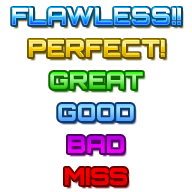
<style>
.page{position:relative;width:192px;height:192px;background:#ffffff}
.page>*{position:absolute;margin:0}
.t1{font:24px "Orbitron-Black"}
.t2{font:24px "Orbitron-Black";letter-spacing:0.01em}
.t3{font:24px "Orbitron-Black";letter-spacing:0.025em}
.t4{font:24px "Orbitron-Black";letter-spacing:-0.025em}
.t5{font:24px "Orbitron-Black";letter-spacing:-0.025em;color:#f00000}
.t6{font:24px "Orbitron-Black";letter-spacing:0.01em;color:#f00000}
.t7{font:24px "Orbitron-Black";letter-spacing:-0.05em;color:#f00000}
.t8{font:24px "Orbitron-Black";color:#f00000}
</style>
<div class="page">
<p class="t1" style="left:12px;top:8px;width:169px;height:17px">FLAWLESS!!</p>
<p class="t2" style="left:29px;top:40px;width:136px;height:17px">PER<span class="t3">F</span>ECT!</p>
<p class="t4" style="left:50px;top:72px;width:93px;height:17px">GREAT</p>
<p class="t4" style="left:58px;top:104px;width:76px;height:17px">GOOD</p>
<p class="t4" style="left:68px;top:136px;width:56px;height:17px">BAD</p>
<p class="t5" style="left:65px;top:168px;width:62px;height:17px">M<span class="t6">I</span><span class="t7">S</span><span class="t8">S</span></p>
</div>
